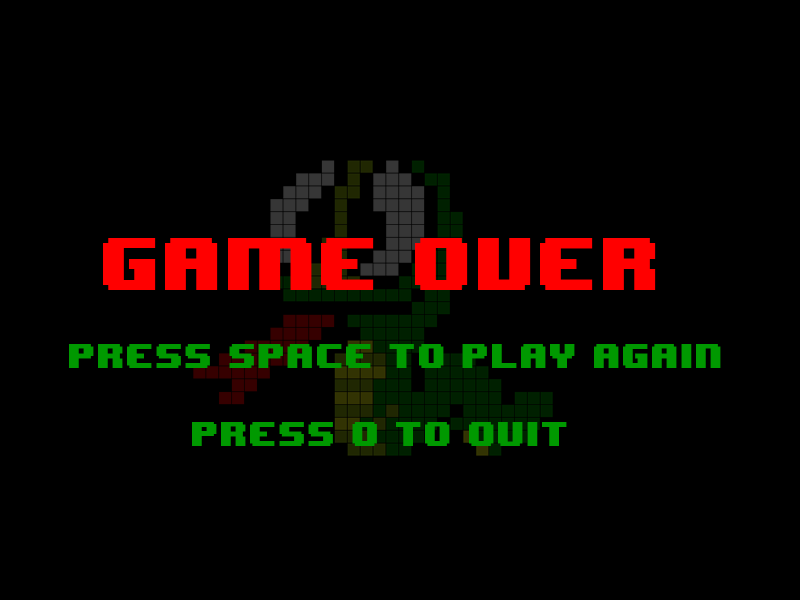
<style>
.page{position:relative;width:800px;height:600px;background:#000000}
.page>*{position:absolute;margin:0}
.t1{font:62.5px "8BITWONDERNominal";color:#ff0000}
.t2{font:29.2px "8BITWONDERNominal";color:#009900}
</style>
<div class="page">
<p class="t1" style="left:103px;top:238px;width:553px;height:52px">Game Over</p>
<p class="t2" style="left:69px;top:344px;width:652px;height:24px">press space to play again</p>
<p class="t2" style="left:192px;top:422px;width:375px;height:24px">Press Q to quit</p>
</div>
